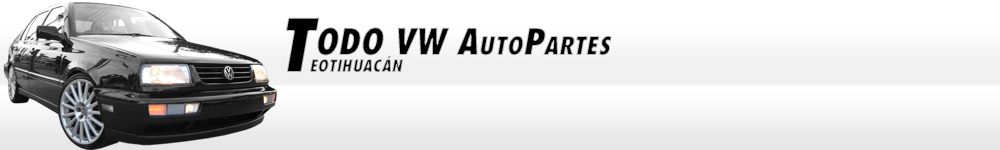
<style>
.page{position:relative;width:1000px;height:150px}
.page>*{position:absolute;margin:0}
.t1{font:72px "Futura-CondensedExtraBold";color:#000000;font-style:italic}
.t2{font:36px "Futura-CondensedExtraBold";color:#000000;font-variant:small-caps;font-style:italic}
.t3{font:24px "Futura-CondensedExtraBold";font-variant:small-caps;font-style:italic}
</style>
<div class="page">
<p class="t1" style="left:286px;top:17px;width:34px;height:55px">T</p>
<p class="t2" style="left:317px;top:27px;width:295px;height:29px">ODO VW AutoPartes</p>
<p class="t3" style="left:310px;top:55px;width:94px;height:18px">eotihuacán</p>
</div>
